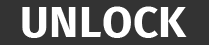
<style>
.page{position:relative;width:209px;height:45px;background:#333333}
.page>*{position:absolute;margin:0}
.t1{font:44px "FiraSans-Bold";color:#ffffff;text-transform:uppercase}
</style>
<div class="page">
<p class="t1" style="left:22px;top:6px;width:165px;height:32px">unlock</p>
</div>
